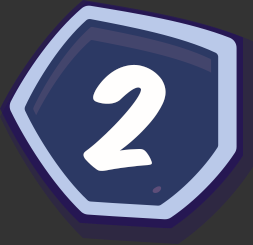
<style>
.page{position:relative;width:253px;height:245px;background:#2c3964}
.page>*{position:absolute;margin:0}
.t1{font:120px "KomikaAxis";color:#fffefd}
</style>
<div class="page">
<p class="t1" style="left:83px;top:64px;width:83px;height:107px">2</p>
</div>
